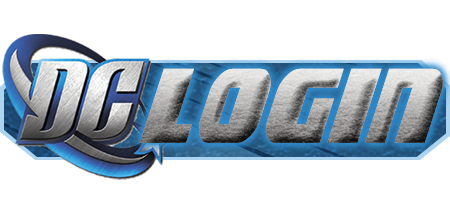
<style>
.page{position:relative;width:450px;height:220px;background:#ffffff}
.page>*{position:absolute;margin:0}
.t1{font:110px "CampJusticeItalic"}
</style>
<div class="page">
<p class="t1" style="left:139px;top:68px;width:304px;height:75px">login</p>
</div>
